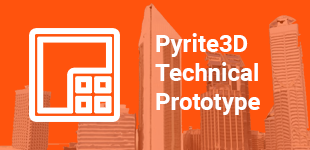
<style>
.page{position:relative;width:310px;height:150px;background:#ff530d}
.page>*{position:absolute;margin:0}
.t1{font:24px "Roboto-Bold";color:#ffffff}
</style>
<div class="page">
<p class="t1" style="left:155px;top:33px;width:105px;height:82px">Pyrite3D <br>Technical <br>Prototype</p>
</div>
